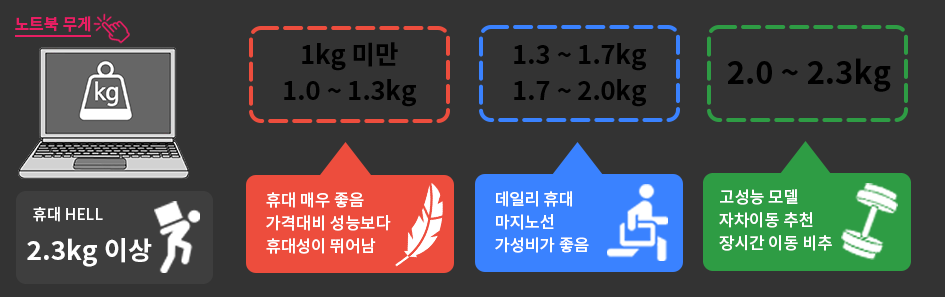
<style>
.page{position:relative;width:945px;height:297px;background:#333333}
.page>*{position:absolute;margin:0}
.t1{font:16.1px "NotoSansKR-Bold";color:#e91e63}
.t2{font:25.6px/35.7px "NotoSansKR-Bold";color:#000000}
.t3{font:31.3px "NotoSansKR-Bold";color:#000000}
.t4{font:16.5px/22.9px "NotoSansKR-Medium";color:#ffffff}
.t5{font:15.5px "NotoSansKR-Medium";color:#ffffff}
.t6{font:26.3px "NotoSansKR-Bold";color:#ffffff}
</style>
<div class="page">
<p class="t1" style="left:15px;top:16px;width:76px;height:16px">노트북 무게</p>
<p class="t2" style="left:284px;top:42px;width:132px;height:65px;text-align:center">1kg 미만<br>1.0 ~ 1.3kg</p>
<p class="t2" style="left:514px;top:43px;width:132px;height:64px;text-align:center">1.3 ~ 1.7kg<br>1.7 ~ 2.0kg</p>
<p class="t3" style="left:727px;top:58px;width:164px;height:34px">2.0 ~ 2.3kg</p>
<p class="t4" style="left:266px;top:192px;width:125px;height:62px">휴대 매우 좋음<br>가격대비 성능보다<br>휴대성이 뛰어남</p>
<p class="t4" style="left:495px;top:191px;width:94px;height:62px">데일리 휴대<br>마지노선<br>가성비가 좋음</p>
<p class="t4" style="left:719px;top:189px;width:113px;height:62px">고성능 모델<br>자차이동 추천<br>장시간 이동 비추</p>
<p class="t5" style="left:33px;top:206px;width:70px;height:16px">휴대 HELL</p>
<p class="t6" style="left:27px;top:238px;width:125px;height:29px">2.3kg 이상</p>
</div>
